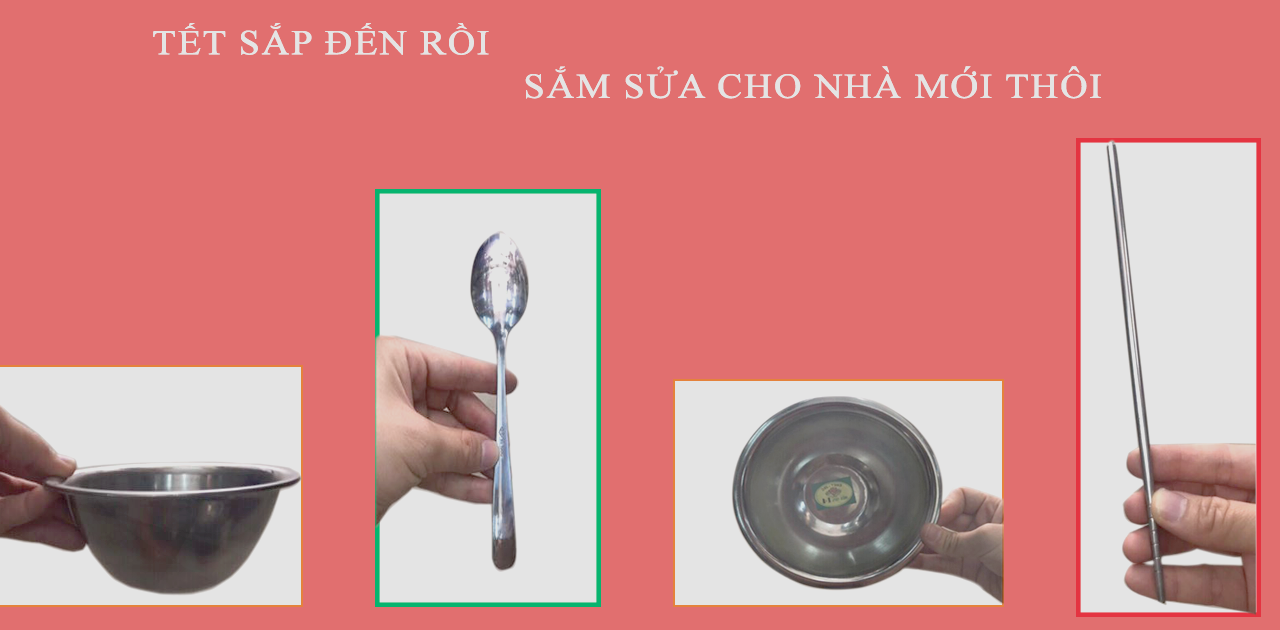
<style>
.page{position:relative;width:1280px;height:630px;background:#e16f6f}
.page>*{position:absolute;margin:0}
.t1{font:35px "TimesNewRomanPSMT";letter-spacing:0.025em;color:#e4e4e4;text-transform:uppercase;font-weight:bold;scale:1.09 1}
</style>
<div class="page">
<p class="t1" style="left:153px;top:23px;width:336px;height:32px">TẾT SẮP ĐẾN RỒI</p>
<p class="t1" style="left:525px;top:66px;width:576px;height:33px">SẮM SỬA CHO NHÀ MỚI THÔI</p>
</div>
